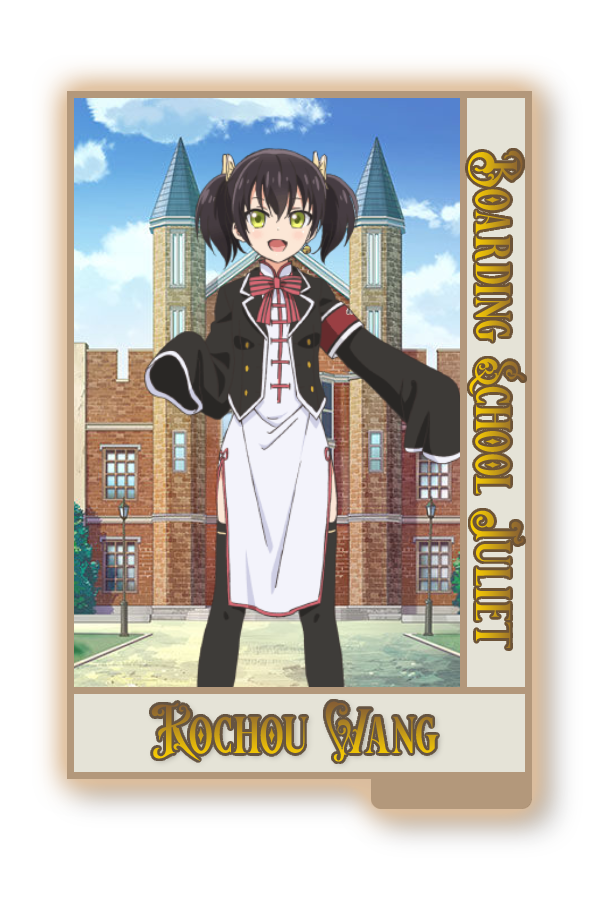
<style>
.page{position:relative;width:600px;height:900px;background:#ffffff}
.page>*{position:absolute;margin:0}
.t1{font:58.9px "VictorianDecadeDemoVersion"}
.t2{font:62.3px "VictorianDecadeDemoVersion"}
</style>
<div class="page">
<p class="t1" style="left:468px;top:150px;width:57px;height:498px;rotate:90deg">Boarding School Juliet</p>
<p class="t2" style="left:151px;top:701px;width:288px;height:61px">Kochou Wang</p>
</div>
